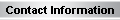
<style>
.page{position:relative;width:120px;height:20px}
.page>*{position:absolute;margin:0}
.t1{font:11px "Arial-BoldMT";color:#000000}
</style>
<div class="page">
<p class="t1" style="left:6px;top:6px;width:108px;height:8px">Contact Information</p>
</div>
